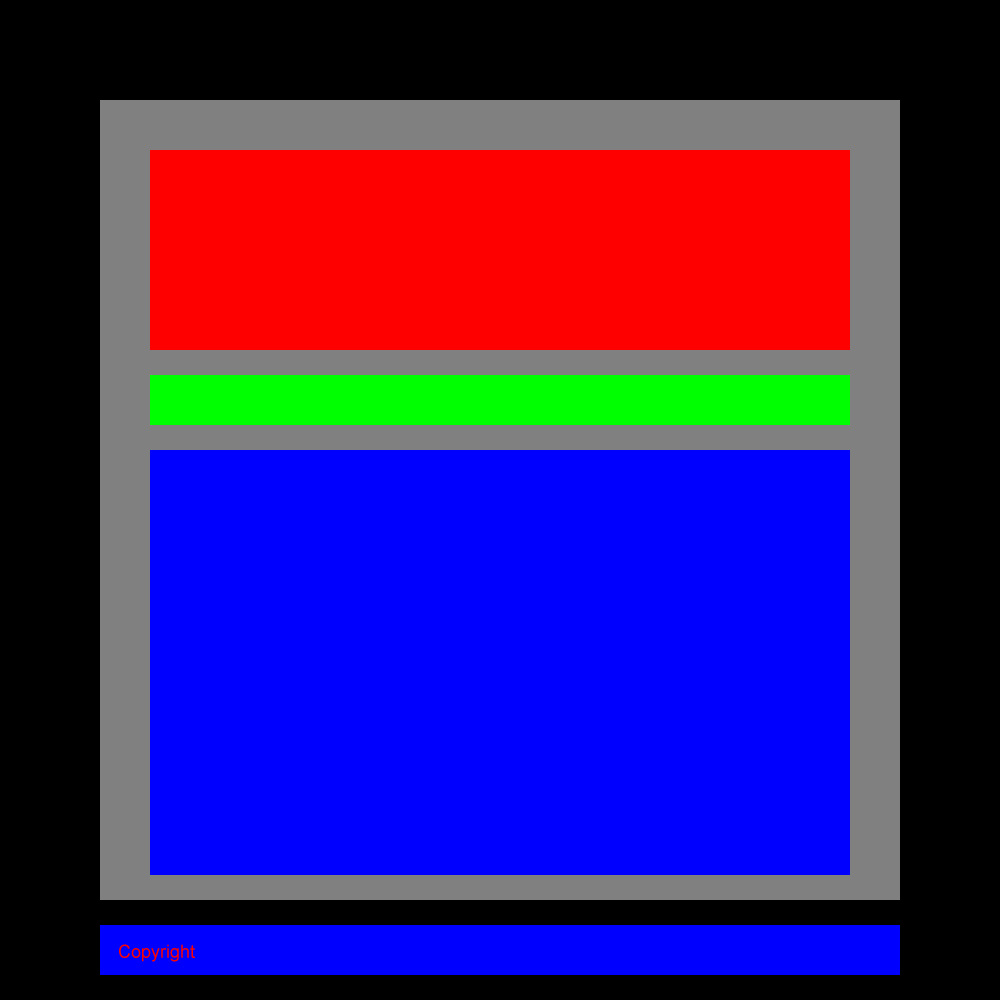
<style>
.page{position:relative;width:1000px;height:1000px;background:#0000ff}
.page>*{position:absolute;margin:0}
.t1{font:18px "ArialMT";color:#ff0000}
</style>
<div class="page">
<p class="t1" style="left:119px;top:944px;width:76px;height:18px">Copyright</p>
</div>
